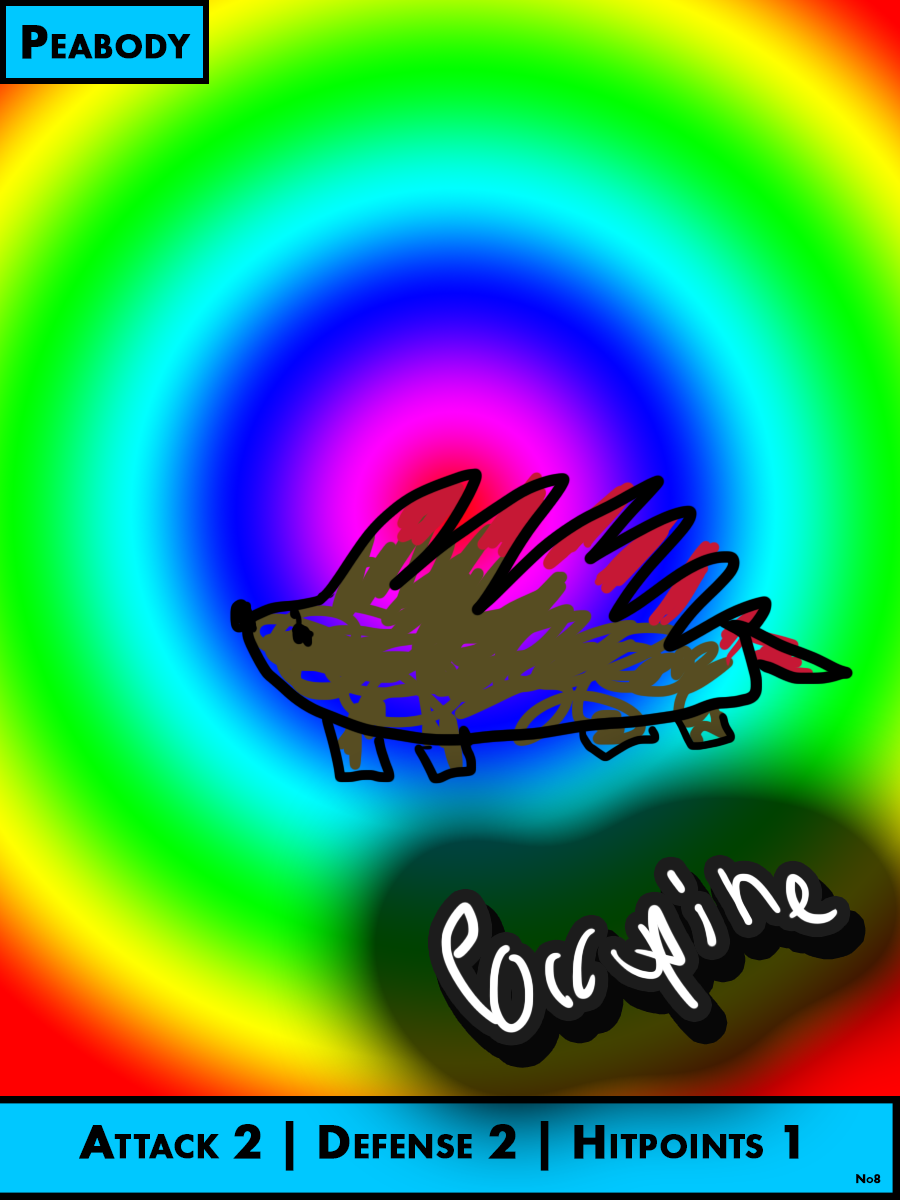
<style>
.page{position:relative;width:900px;height:1200px}
.page>*{position:absolute;margin:0}
.t1{font:50px "FuturaPT-Heavy";color:#000000;font-variant:small-caps;font-weight:bold}
.t2{font:12.5px "FuturaPT-Heavy";color:#000000;font-variant:small-caps;font-weight:bold}
</style>
<div class="page">
<p class="t1" style="left:22px;top:25px;width:169px;height:34px">Peabody</p>
<p class="t1" style="left:79px;top:1121px;width:720px;height:50px">Attack 2 | Defense 2 | Hitpoints 1</p>
<p class="t2" style="left:856px;top:1174px;width:25px;height:10px">No8</p>
</div>
